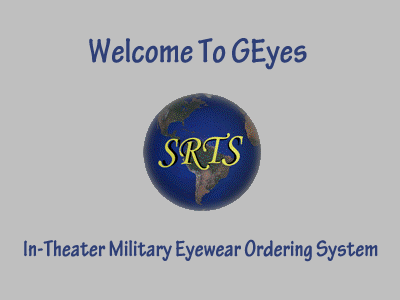
<style>
.page{position:relative;width:400px;height:300px;background:#bfbfbf}
.page>*{position:absolute;margin:0}
.t1{font:36px "TektonPro-BoldCond";color:#2e3f77}
.t2{font:24px "TektonPro-BoldCond";color:#2e3f77}
</style>
<div class="page">
<p class="t1" style="left:89px;top:38px;width:218px;height:32px">Welcome To GEyes</p>
<p class="t2" style="left:24px;top:239px;width:354px;height:23px">In-Theater Military Eyewear Ordering System</p>
</div>
